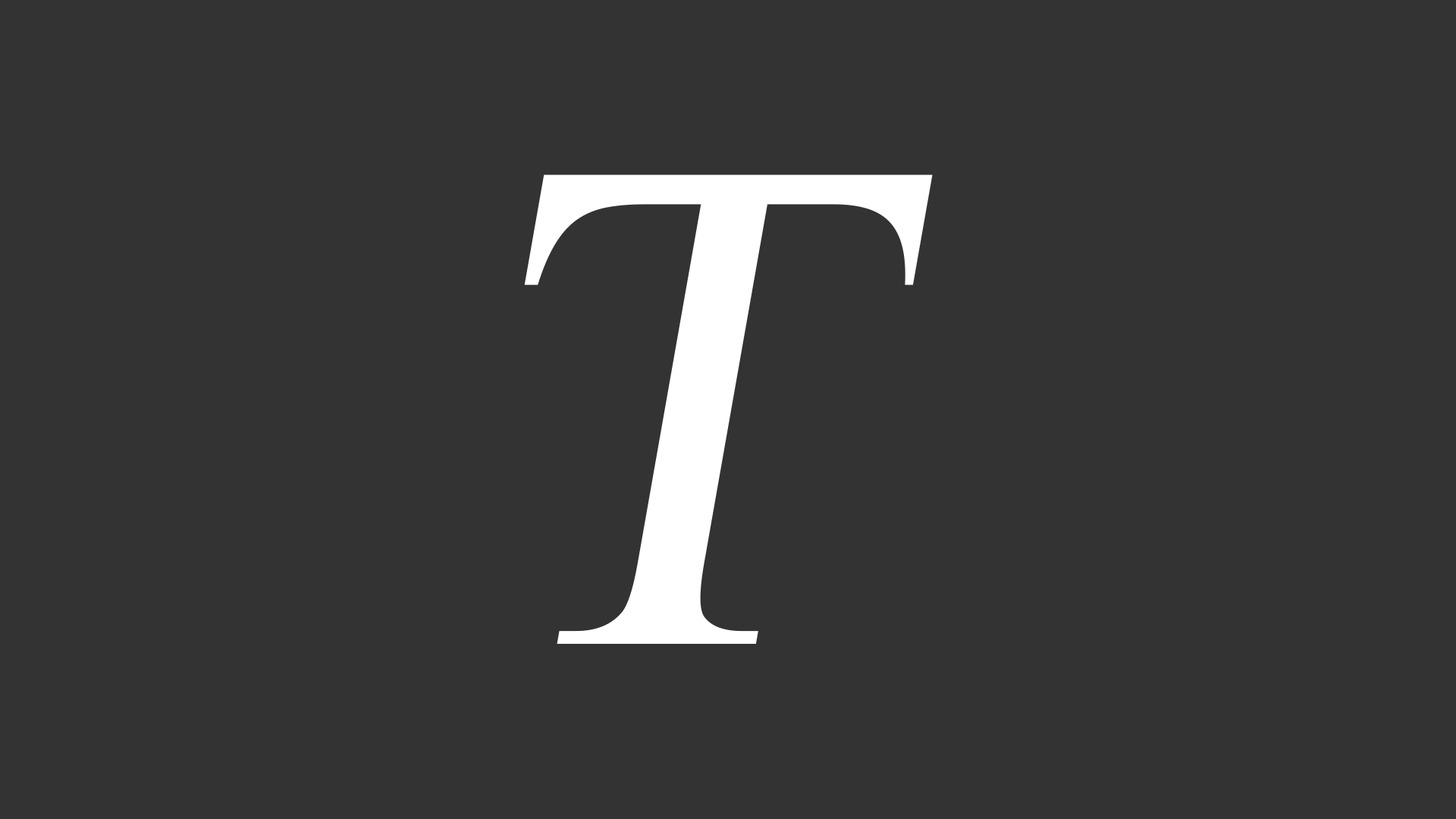
<style>
.page{position:relative;width:1456px;height:819px;background:#333333}
.page>*{position:absolute;margin:0}
.t1{font:708.1px "MongolianBaiti";color:#ffffff;font-style:italic}
</style>
<div class="page">
<p class="t1" style="left:524px;top:174px;width:409px;height:470px">T</p>
</div>
